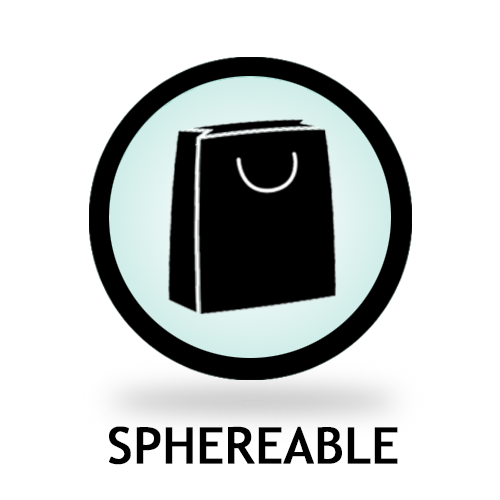
<style>
.page{position:relative;width:500px;height:500px;background:#ffffff}
.page>*{position:absolute;margin:0}
.t1{font:50px "TrebuchetMS";color:#000000;font-weight:bold}
</style>
<div class="page">
<p class="t1" style="left:109px;top:426px;width:289px;height:39px">SPHEREABLE</p>
</div>
